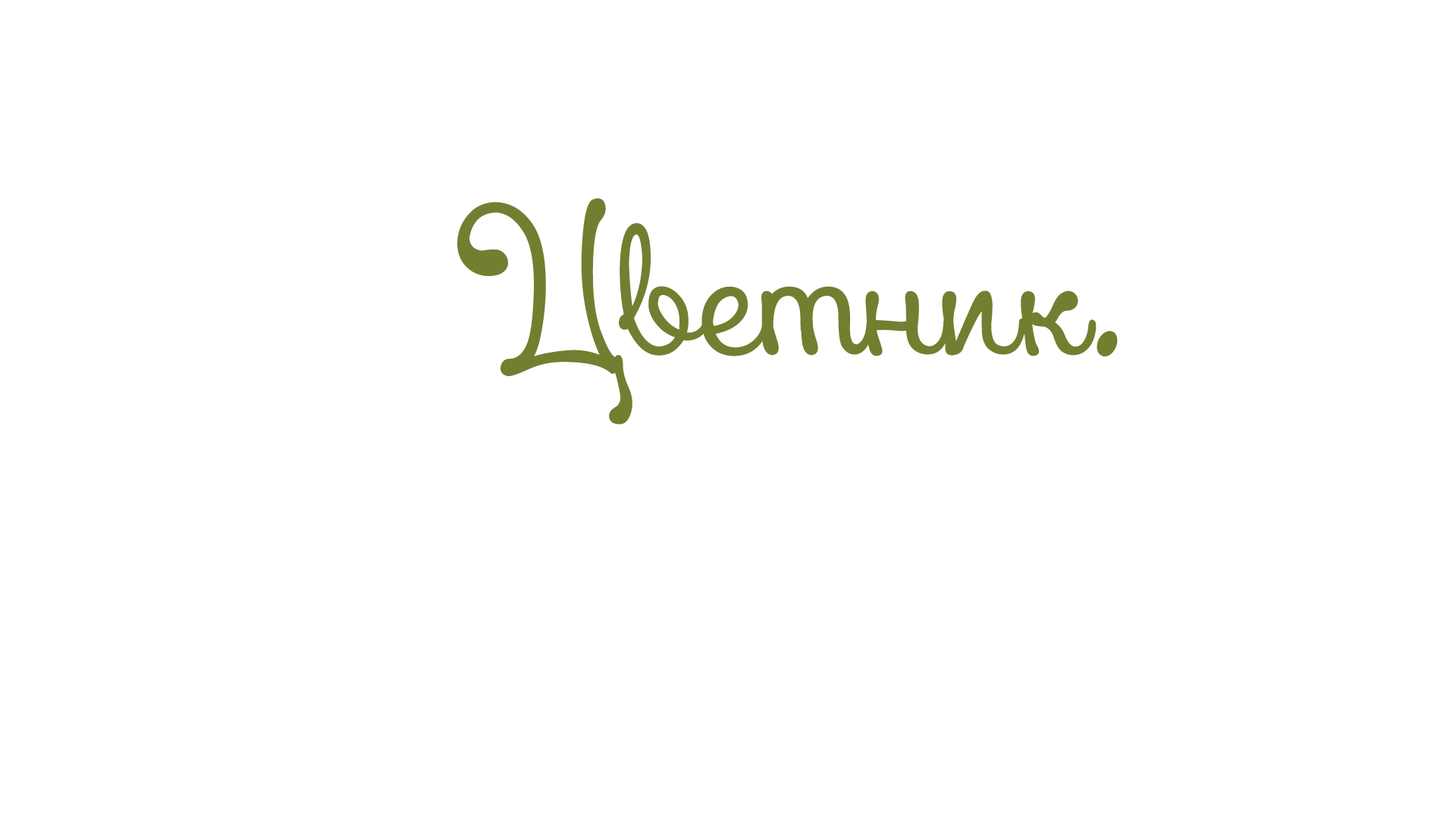
<style>
.page{position:relative;width:1456px;height:819px;background:#ffffff}
.page>*{position:absolute;margin:0}
.t1{font:151.7px "Xiomara";color:#708030}
</style>
<div class="page">
<p class="t1" style="left:457px;top:198px;width:661px;height:227px">Цветник.</p>
</div>
